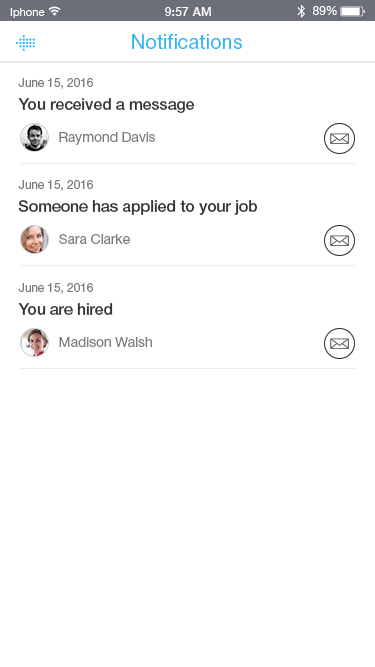
<style>
.page{position:relative;width:375px;height:667px;background:#ffffff}
.page>*{position:absolute;margin:0}
.t1{font:20px "HelveticaNeueCyr-Roman";color:#29b6f6}
.t2{font:12px "HelveticaNeueCyr-Roman";letter-spacing:-0.01em;color:#7d7d7d}
.t3{font:16px "HelveticaNeueCyr-Medium";letter-spacing:-0.01em;color:#343433}
.t4{font:14px "HelveticaNeueCyr-Roman";letter-spacing:-0.01em;color:#7d7d7d}
</style>
<div class="page">
<p class="t1" style="left:132px;top:34px;width:110px;height:15px">Notifications</p>
<p class="t2" style="left:18px;top:78px;width:75px;height:11px">June 15, 2016</p>
<p class="t3" style="left:18px;top:98px;width:177px;height:15px">You received a message</p>
<p class="t4" style="left:59px;top:132px;width:96px;height:13px">Raymond Davis</p>
<p class="t2" style="left:18px;top:180px;width:75px;height:11px">June 15, 2016</p>
<p class="t3" style="left:18px;top:200px;width:240px;height:15px">Someone has applied to your job</p>
<p class="t4" style="left:59px;top:234px;width:71px;height:10px">Sara Clarke</p>
<p class="t2" style="left:18px;top:283px;width:75px;height:11px">June 15, 2016</p>
<p class="t3" style="left:18px;top:303px;width:95px;height:12px">You are hired</p>
<p class="t4" style="left:59px;top:337px;width:93px;height:11px">Madison Walsh</p>
</div>
